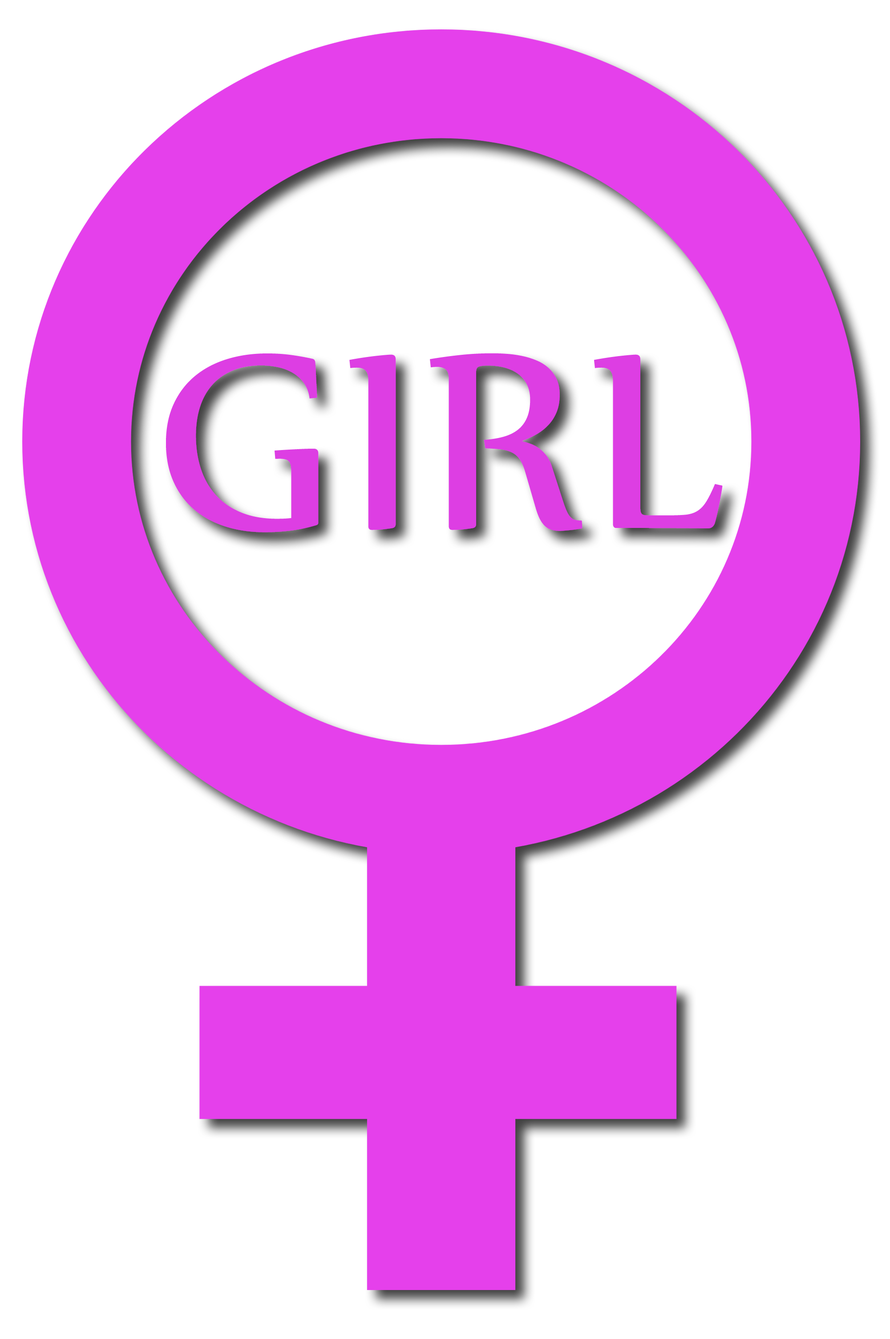
<style>
.page{position:relative;width:890px;height:1339px;background:#ffffff}
.page>*{position:absolute;margin:0}
.t1{font:300.5px "Nyala-Regular";letter-spacing:0.021em;color:#dd3ee3}
</style>
<div class="page">
<p class="t1" style="left:166px;top:353px;width:557px;height:179px">GIRL</p>
</div>
